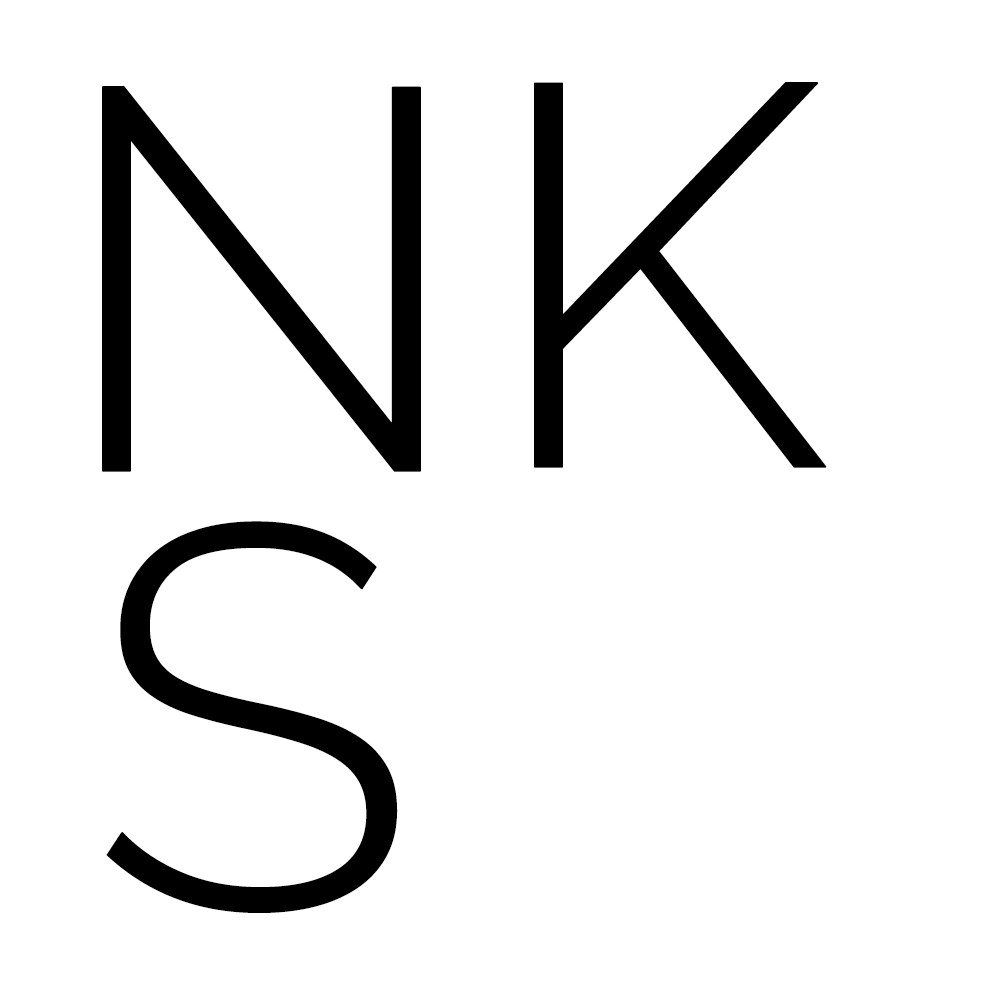
<style>
.page{position:relative;width:1000px;height:1000px;background:#ffffff}
.page>*{position:absolute;margin:0}
.t1{font:541px "Raleway-Light";color:#000000;text-transform:uppercase;font-weight:bold}
</style>
<div class="page">
<p class="t1" style="left:102px;top:86px;width:319px;height:386px">n</p>
<p class="t1" style="left:534px;top:82px;width:293px;height:386px">k</p>
<p class="t1" style="left:106px;top:521px;width:292px;height:392px">s</p>
</div>
